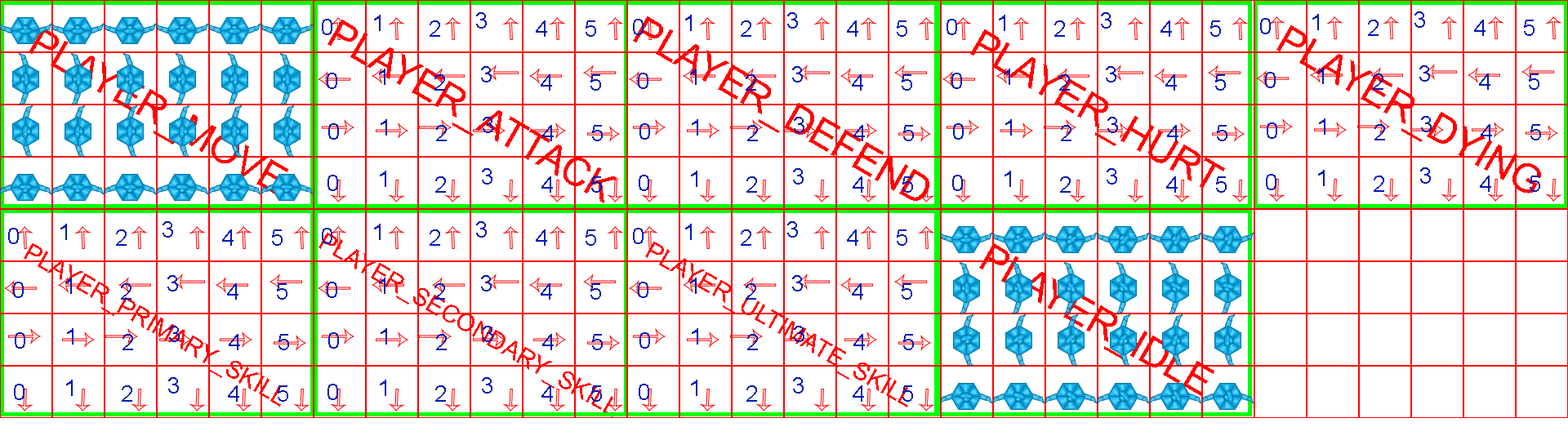
<style>
.page{position:relative;width:1568px;height:427px;background:#ffffff}
.page>*{position:absolute;margin:0}
.t1{font:39.4px "ArialMT";color:#ff0000}
.t2{font:24.5px "ArialMT";color:#ff0000}
</style>
<div class="page">
<p class="t1" style="left:633px;top:16px;width:296px;height:185px;rotate:30deg">PLAYER_DEFEND</p>
<p class="t1" style="left:29px;top:28px;width:259px;height:166px;rotate:30deg">PLAYER_MOVE</p>
<p class="t1" style="left:327px;top:20px;width:291px;height:183px;rotate:30deg">PLAYER_ATTACK</p>
<p class="t1" style="left:970px;top:29px;width:255px;height:160px;rotate:30deg">PLAYER_HURT</p>
<p class="t1" style="left:1276px;top:25px;width:265px;height:169px;rotate:30deg">PLAYER_DYING</p>
<p class="t2" style="left:318px;top:233px;width:295px;height:184px;rotate:30deg">PLAYER_SECONDARY_SKILL</p>
<p class="t2" style="left:24px;top:243px;width:257px;height:164px;rotate:30deg">PLAYER_PRIMARY_SKILL</p>
<p class="t2" style="left:645px;top:242px;width:263px;height:166px;rotate:30deg">PLAYER_ULTIMATE_SKILL</p>
<p class="t1" style="left:979px;top:243px;width:235px;height:153px;rotate:30deg">PLAYER_IDLE</p>
</div>
